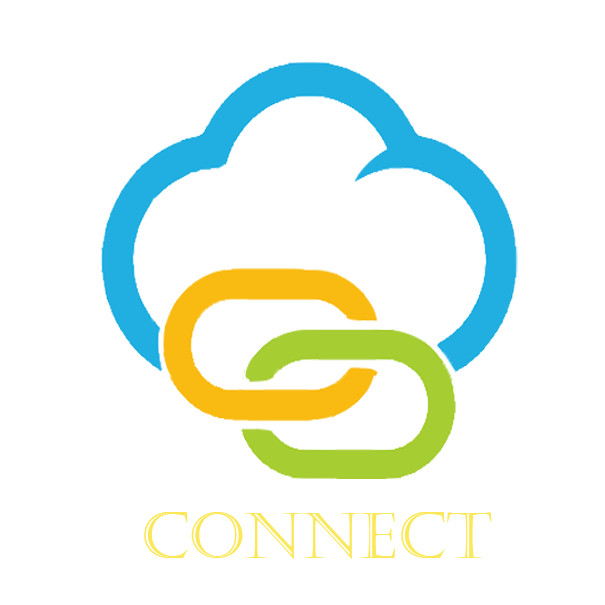
<style>
.page{position:relative;width:605px;height:605px;background:#ffffff}
.page>*{position:absolute;margin:0}
.t1{font:64px "Castellar";color:#fbe85a}
</style>
<div class="page">
<p class="t1" style="left:144px;top:512px;width:348px;height:47px">Connect</p>
</div>
